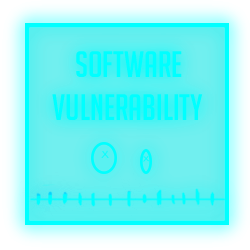
<style>
.page{position:relative;width:250px;height:250px}
.page>*{position:absolute;margin:0}
.t1{font:36px "BigNoodleTitling";color:#00ffff}
</style>
<div class="page">
<p class="t1" style="left:52px;top:51px;width:151px;height:69px">Software<br>vulnerability</p>
</div>
